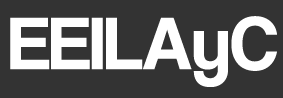
<style>
.page{position:relative;width:283px;height:98px;background:#333333}
.page>*{position:absolute;margin:0}
.t1{font:77px "CoolveticaRg-Regular";color:#ffffff}
</style>
<div class="page">
<p class="t1" style="left:10px;top:16px;width:267px;height:71px">EEILAyC</p>
</div>
